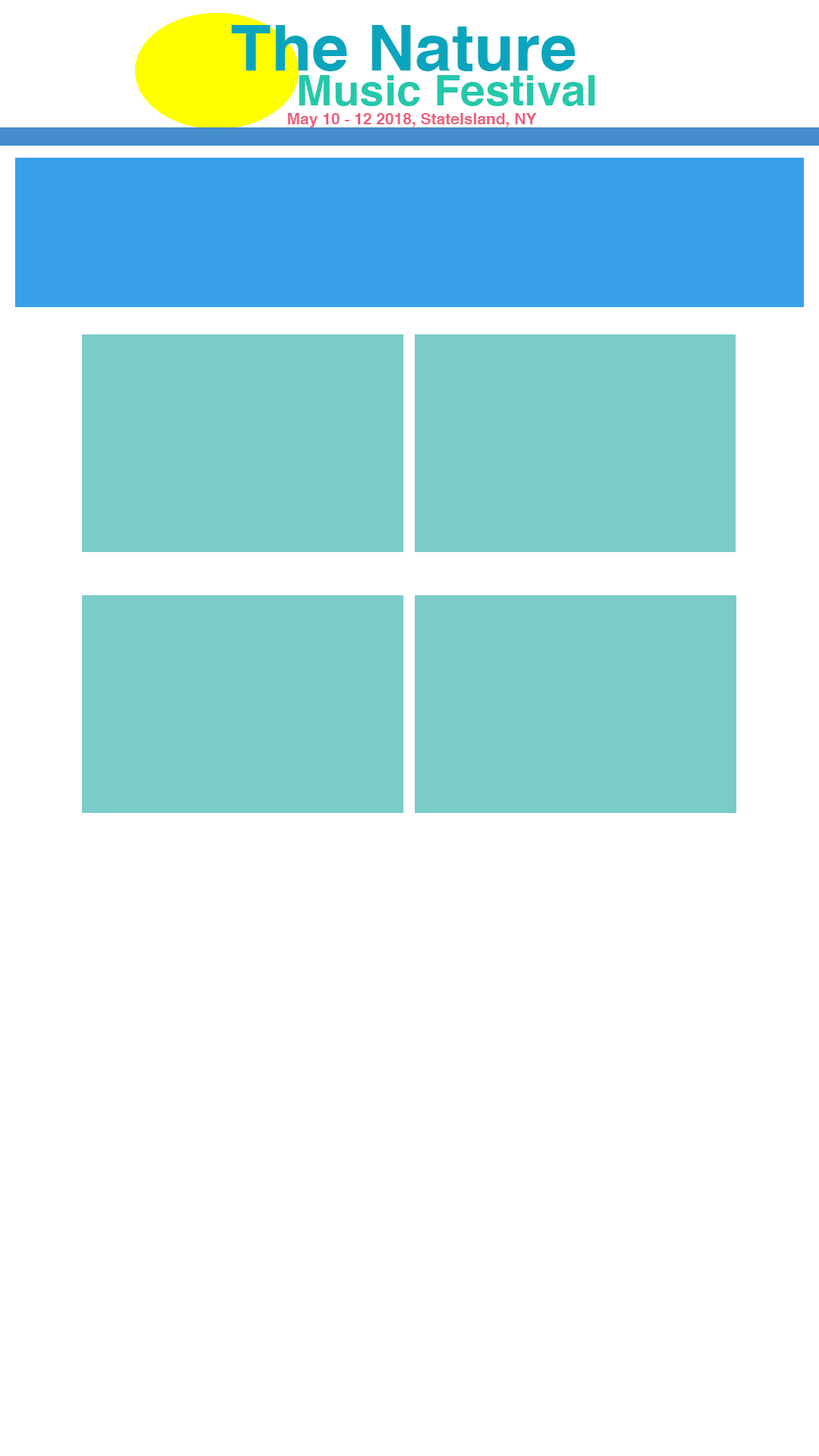
<style>
.page{position:relative;width:819px;height:1456px;background:#ffffff}
.page>*{position:absolute;margin:0}
.t1{font:63.3px "Helvetica-Bold";color:#0aa5bc;scale:1.05 1}
.t2{font:42.2px "Helvetica-Bold";color:#25c8ab;scale:1.05 1}
.t3{font:15.9px "Helvetica-Bold";color:#ec5e7c}
</style>
<div class="page">
<p class="t1" style="left:231px;top:25px;width:345px;height:46px">The Nature</p>
<p class="t2" style="left:299px;top:75px;width:296px;height:31px">Music Festival</p>
<p class="t3" style="left:287px;top:113px;width:250px;height:14px">May 10 - 12 2018, StateIsland, NY</p>
</div>
